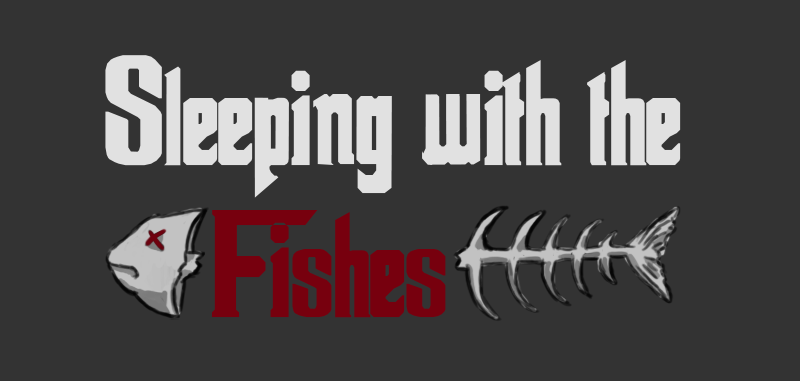
<style>
.page{position:relative;width:800px;height:381px;background:#333333}
.page>*{position:absolute;margin:0}
.t1{font:150px "Godfather";color:#e1e1e1}
.t2{font:150px "Godfather";color:#77000e}
.t3{font:150px "Godfather";color:#000000}
</style>
<div class="page">
<p class="t1" style="left:105px;top:55px;width:576px;height:143px">Sleeping with the</p>
<p class="t2" style="left:211px;top:210px;width:235px;height:108px"><span class="t3"><br>    </span>Fishes</p>
</div>
